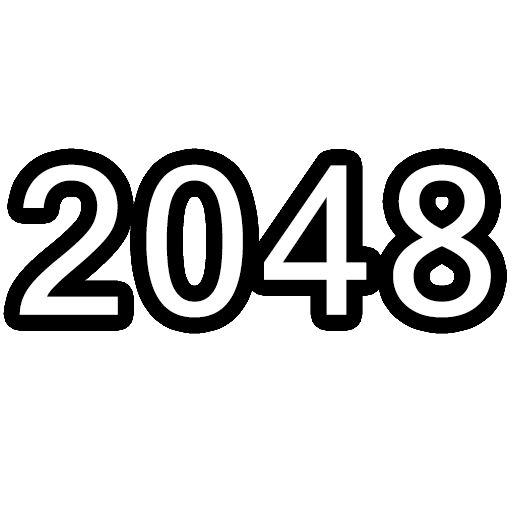
<style>
.page{position:relative;width:512px;height:512px;background:#ffffff}
.page>*{position:absolute;margin:0}
.t1{font:205px "MicrosoftSansSerif";letter-spacing:0.02em;color:#ffffff;font-weight:bold}
</style>
<div class="page">
<p class="t1" style="left:19px;top:164px;width:472px;height:154px">2048</p>
</div>
